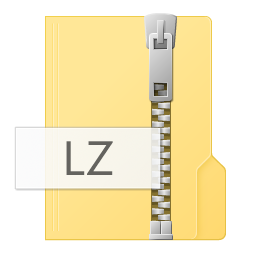
<style>
.page{position:relative;width:256px;height:256px;background:#ffffff}
.page>*{position:absolute;margin:0}
.t1{font:48px "SegoeUI";color:#64635e}
</style>
<div class="page">
<p class="t1" style="left:66px;top:141px;width:47px;height:34px">LZ</p>
</div>
